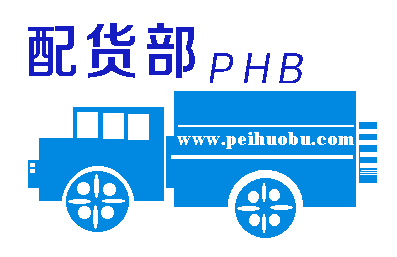
<style>
.page{position:relative;width:397px;height:257px;background:#ffffff}
.page>*{position:absolute;margin:0}
.t1{font:60px "FZZZHONGJW--GB1-0";letter-spacing:0.1em;color:#141cc2;scale:0.9 1}
.t2{font:36px "FZZZHUNHJW--GB1-0";letter-spacing:0.1em;color:#141cc2;font-style:italic;scale:0.9 1}
.t3{font:18px "Elephant-Regular";letter-spacing:0.1em;color:#ffffff;scale:0.9 1}
</style>
<div class="page">
<p class="t1" style="left:28px;top:23px;width:167px;height:55px">配货部</p>
<p class="t2" style="left:210px;top:53px;width:93px;height:30px">ＰＨＢ</p>
<p class="t3" style="left:177px;top:132px;width:177px;height:17px">www.peihuobu.com</p>
</div>
